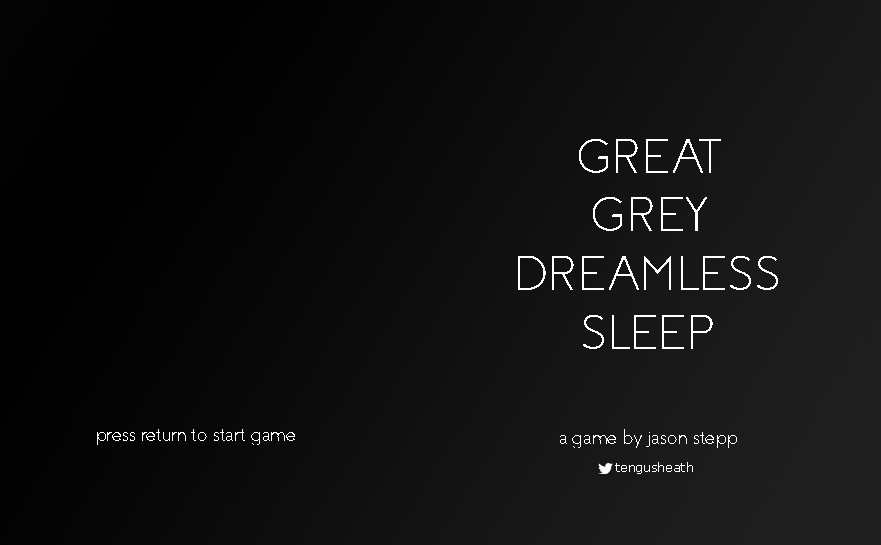
<style>
.page{position:relative;width:881px;height:545px}
.page>*{position:absolute;margin:0}
.t1{font:48.9px "Coves-Light";color:#ffffff}
.t2{font:21.2px "Coves-Light";color:#ffffff}
.t3{font:12.1px "Verdana";color:#ffffff}
</style>
<div class="page">
<p class="t1" style="left:518px;top:139px;width:260px;height:210px;text-align:center">GREAT<br>GREY<br>DREAMLESS<br>SLEEP</p>
<p class="t2" style="left:97px;top:429px;width:198px;height:16px">press return to start game</p>
<p class="t2" style="left:560px;top:429px;width:177px;height:19px">a game by jason stepp</p>
<p class="t3" style="left:615px;top:462px;width:78px;height:12px">tengusheath</p>
</div>
